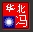
<style>
.page{position:relative;width:33px;height:32px;background:#f20000}
.page>*{position:absolute;margin:0}
.t1{font:10.4px "SimSun";color:#ffffff}
.t2{font:11.7px "SimSun";color:#ffffff}
</style>
<div class="page">
<p class="t1" style="left:6px;top:4px;width:19px;height:9px">华北</p>
<p class="t2" style="left:16px;top:15px;width:11px;height:12px">冯</p>
</div>
